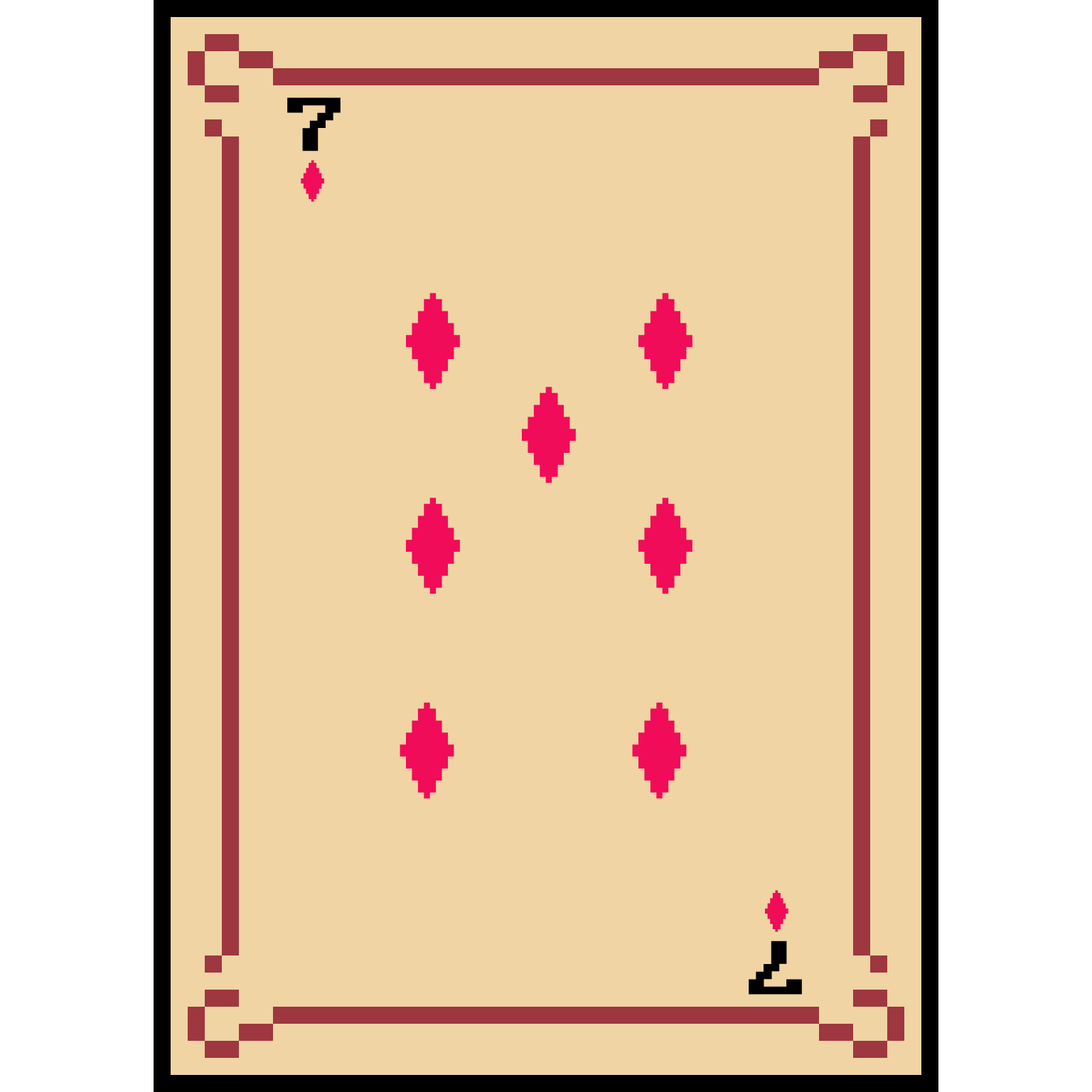
<style>
.page{position:relative;width:1092px;height:1092px;background:#f0d4a3}
.page>*{position:absolute;margin:0}
.t1{font:106.6px "ArcadeClassic";color:#000000}
</style>
<div class="page">
<p class="t1" style="left:287px;top:97px;width:54px;height:54px">7</p>
<p class="t1" style="left:749px;top:941px;width:53px;height:54px;rotate:180deg">7</p>
</div>
